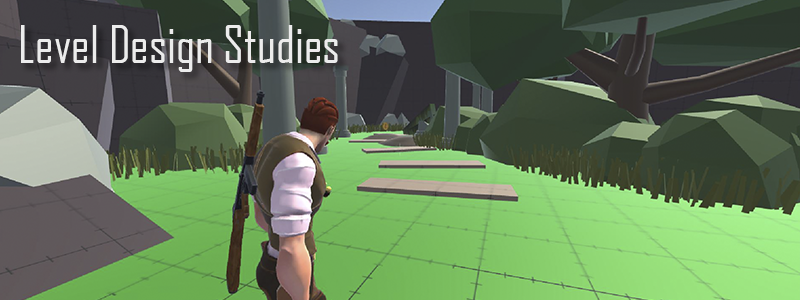
<style>
.page{position:relative;width:800px;height:300px}
.page>*{position:absolute;margin:0}
.t1{font:50px "AgencyFB-Reg";color:#ececec}
</style>
<div class="page">
<p class="t1" style="left:21px;top:25px;width:317px;height:47px">Level Design Studies</p>
</div>
